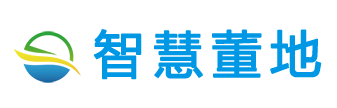
<style>
.page{position:relative;width:337px;height:108px;background:#ffffff}
.page>*{position:absolute;margin:0}
.t1{font:50px "MicrosoftYaHei";letter-spacing:0.15em;color:#0097e5;font-weight:bold}
</style>
<div class="page">
<p class="t1" style="left:93px;top:29px;width:229px;height:51px">智慧董地</p>
</div>
